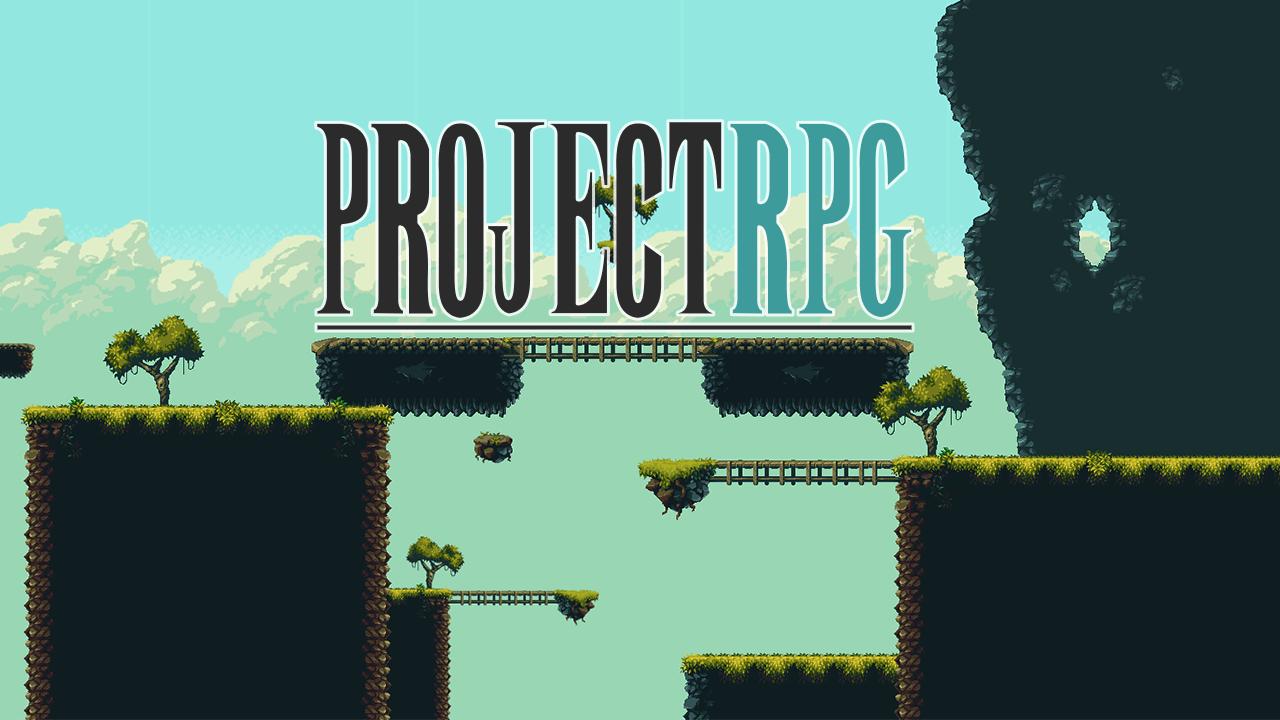
<style>
.page{position:relative;width:1280px;height:720px;background:#0f1d21}
.page>*{position:absolute;margin:0}
.t1{font:200px "New";color:#2b2b2b}
.t2{font:200px "New";color:#3d9c9b}
</style>
<div class="page">
<p class="t1" style="left:315px;top:120px;width:598px;height:200px">PROJECT<span class="t2">RPG</span></p>
</div>
